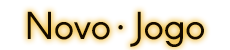
<style>
.page{position:relative;width:230px;height:50px;background:#ffffff}
.page>*{position:absolute;margin:0}
.t1{font:38px "Arcon-Regular";color:#160c00}
</style>
<div class="page">
<p class="t1" style="left:27px;top:11px;width:177px;height:36px">Novo·Jogo</p>
</div>
